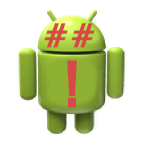
<style>
.page{position:relative;width:144px;height:144px;background:#ffffff}
.page>*{position:absolute;margin:0}
.t1{font:30px "H2hdrM";color:#d54949}
.t2{font:55px "H2hdrM";color:#d54949}
</style>
<div class="page">
<p class="t1" style="left:44px;top:23px;width:24px;height:25px">#</p>
<p class="t1" style="left:71px;top:23px;width:24px;height:25px">#</p>
<p class="t2" style="left:67px;top:60px;width:10px;height:48px">!</p>
</div>
